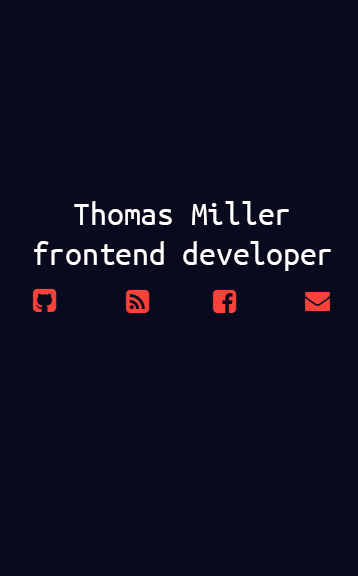
<style>
.page{position:relative;width:358px;height:576px;background:#0a0a1e}
.page>*{position:absolute;margin:0}
.t1{font:33.5px "UbuntuMono-Regular";color:#ffffff}
</style>
<div class="page">
<p class="t1" style="left:34px;top:201px;width:297px;height:70px;text-align:center">Thomas Miller<br>frontend developer</p>
</div>
